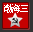
<style>
.page{position:relative;width:33px;height:32px;background:#c50000}
.page>*{position:absolute;margin:0}
.t1{font:10.4px "SimSun";letter-spacing:-0.25em;color:#ffffff}
</style>
<div class="page">
<p class="t1" style="left:4px;top:4px;width:24px;height:9px">渤海三</p>
</div>
